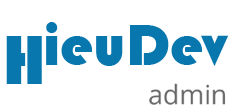
<style>
.page{position:relative;width:233px;height:108px;background:#ffffff}
.page>*{position:absolute;margin:0}
.t1{font:60px "Bauhaus93";color:#0877ae}
.t2{font:72px "Bauhaus93";color:#0877ae}
</style>
<div class="page">
<p class="t1" style="left:46px;top:22px;width:182px;height:44px">ieuDev</p>
<p class="t2" style="left:6px;top:36px;width:36px;height:48px">H</p>
</div>
